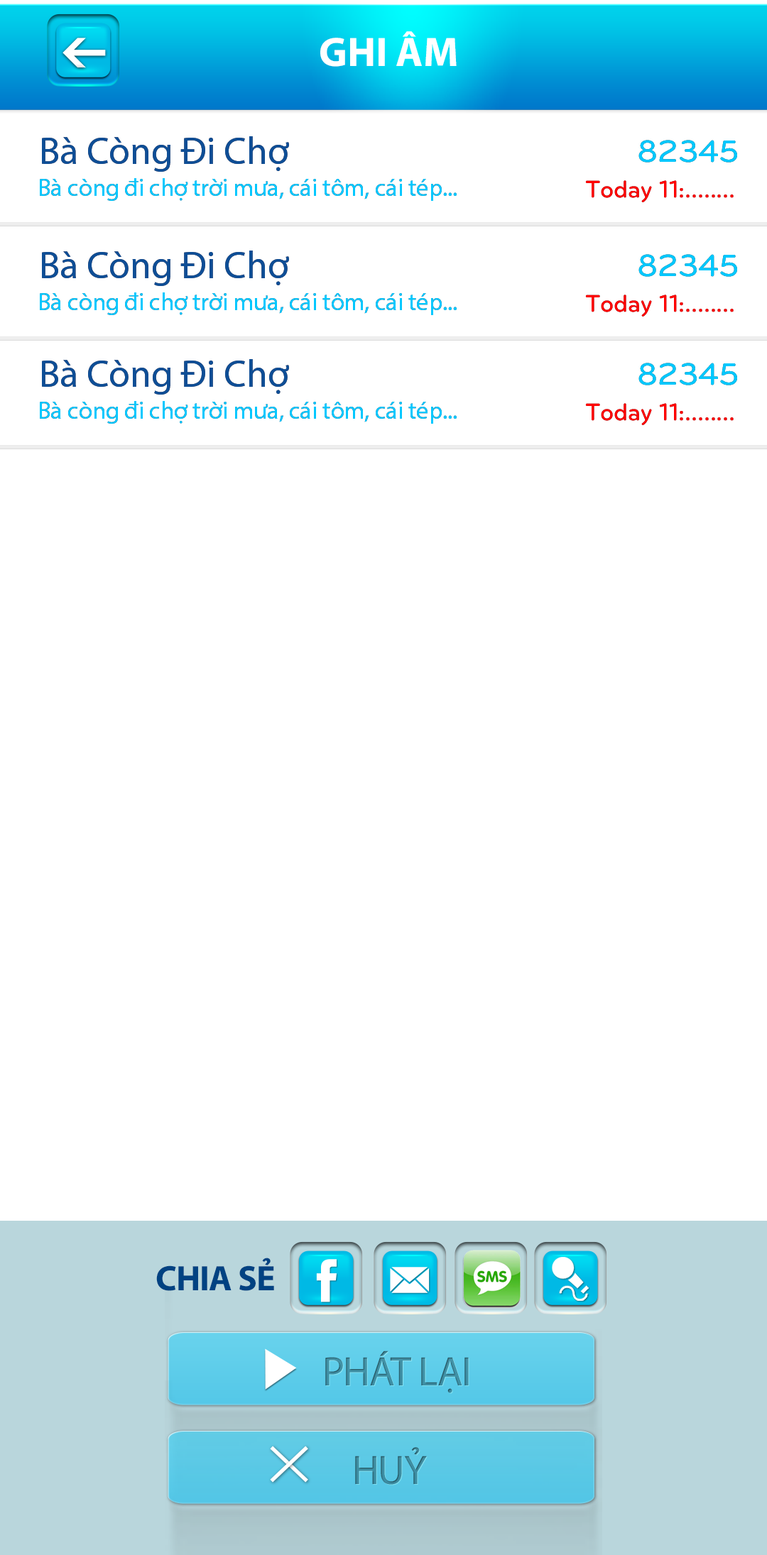
<style>
.page{position:relative;width:767px;height:1555px;background:#ffffff}
.page>*{position:absolute;margin:0}
.t1{font:41.4px "MyriadPro-Bold";color:#ffffff}
.t2{font:38.5px "MyriadPro-Regular";color:#0e4e96}
.t3{font:38.5px "MyriadPro-Regular";letter-spacing:-0.005em;color:#0e4e96}
.t4{font:31.9px "UTMBryantLGBold";letter-spacing:-0.005em;color:#00c8ff}
.t5{font:24.8px "MyriadPro-Regular";letter-spacing:-0.005em;color:#00c8ff}
.t6{font:24.8px "UTMBryantLGBold";letter-spacing:-0.005em;color:#ff0000}
.t7{font:35.5px "MyriadPro-Bold";letter-spacing:-0.02em;color:#004282}
.t8{font:41.4px "MyriadPro-Regular";letter-spacing:-0.02em;color:#3e8ea2}
.t9{font:41.4px "MyriadPro-Regular";letter-spacing:-0.02em;color:#3c8b9f}
</style>
<div class="page">
<p class="t1" style="left:320px;top:31px;width:136px;height:36px">GHI ÂM</p>
<p class="t2" style="left:42px;top:136px;width:247px;height:36px"><span class="t3">B</span>à Còng Đi Chợ</p>
<p class="t4" style="left:638px;top:140px;width:99px;height:23px">82345</p>
<p class="t5" style="left:40px;top:178px;width:416px;height:23px">Bà còng đi chợ trời mưa, cái tôm, cái tép...</p>
<p class="t6" style="left:585px;top:180px;width:148px;height:22px">Today 11:........</p>
<p class="t2" style="left:42px;top:251px;width:247px;height:35px"><span class="t3">B</span>à Còng Đi Chợ</p>
<p class="t4" style="left:638px;top:254px;width:99px;height:23px">82345</p>
<p class="t5" style="left:40px;top:292px;width:416px;height:23px">Bà còng đi chợ trời mưa, cái tôm, cái tép...</p>
<p class="t6" style="left:585px;top:295px;width:148px;height:22px">Today 11:........</p>
<p class="t2" style="left:42px;top:359px;width:247px;height:36px"><span class="t3">B</span>à Còng Đi Chợ</p>
<p class="t4" style="left:638px;top:363px;width:99px;height:22px">82345</p>
<p class="t5" style="left:40px;top:401px;width:416px;height:23px">Bà còng đi chợ trời mưa, cái tôm, cái tép...</p>
<p class="t6" style="left:585px;top:403px;width:148px;height:22px">Today 11:........</p>
<p class="t7" style="left:156px;top:1258px;width:118px;height:33px">CHIA SẺ</p>
<p class="t8" style="left:325px;top:1351px;width:144px;height:42px">PHÁT LẠI</p>
<p class="t9" style="left:355px;top:1447px;width:72px;height:38px">HUỶ</p>
</div>
